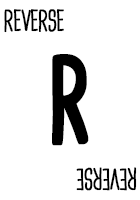
<style>
.page{position:relative;width:140px;height:200px;background:#ffffff}
.page>*{position:absolute;margin:0}
.t1{font:28.7px "CardenioModern-Reg";letter-spacing:-0.05em;color:#000000;text-transform:uppercase;font-weight:bold;scale:0.87 1}
.t2{font:115px "CardenioModern-Bold";letter-spacing:-0.1em;color:#000000;text-transform:uppercase;font-weight:bold;scale:0.87 1}
</style>
<div class="page">
<p class="t1" style="left:4px;top:9px;width:60px;height:24px">reverse</p>
<p class="t2" style="left:52px;top:54px;width:37px;height:92px">R</p>
<p class="t1" style="left:76px;top:167px;width:61px;height:24px;rotate:180deg">reverse</p>
</div>
